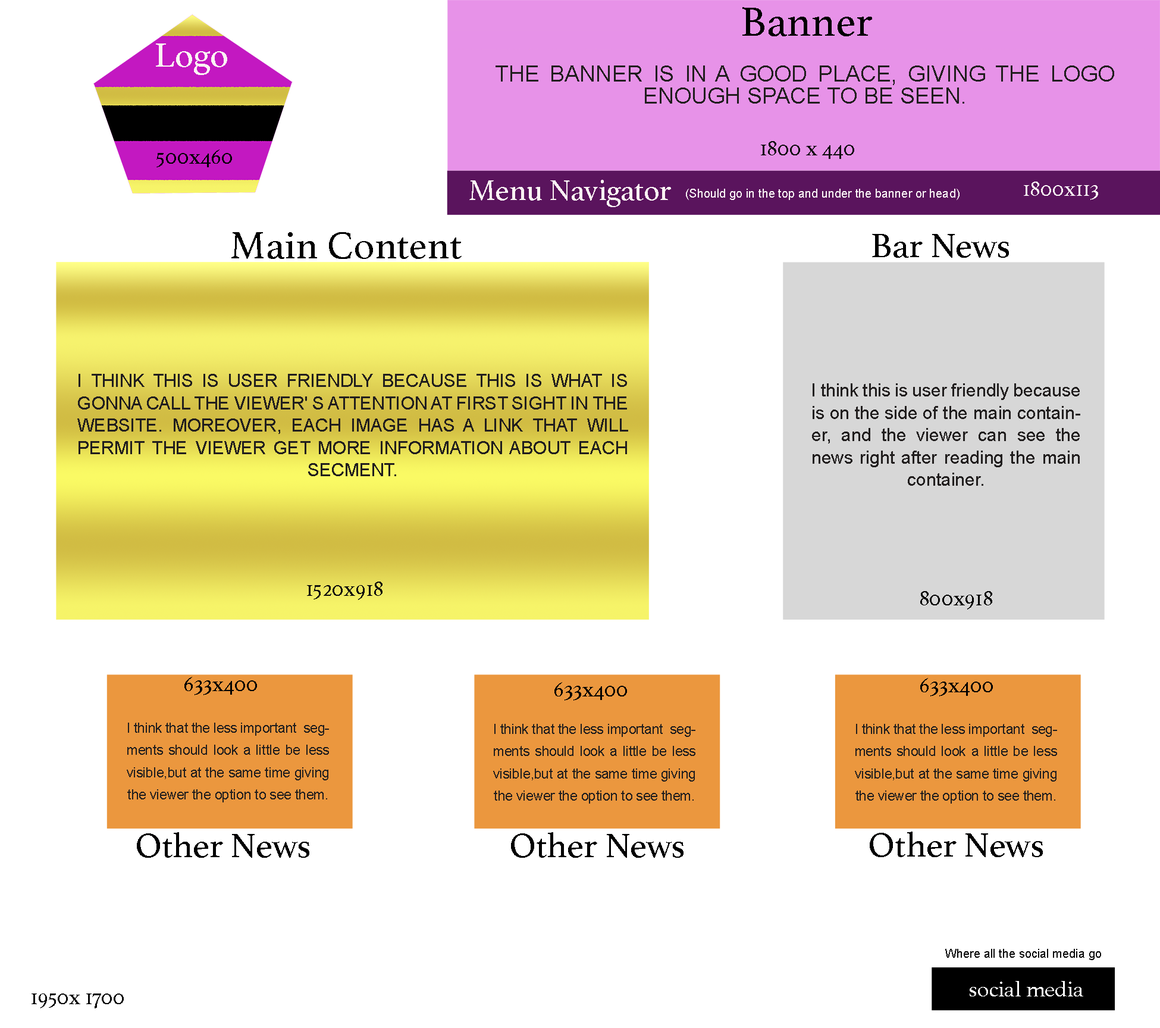
<style>
.page{position:relative;width:1160px;height:1028px;background:#ffffff}
.page>*{position:absolute;margin:0}
.t1{font:43.2px "Athelas-Regular";color:#000000}
.t2{font:35.7px "Athelas-Regular";color:#faf3f3}
.t3{font:22.3px/22.3px "ArialMT";color:#211e1e}
.t4{font:22.3px "Athelas-Regular";color:#000000}
.t5{font:22.3px "Athelas-Regular";color:#0e0e0e}
.t6{font:30.3px "Athelas-Regular";color:#faf3f3}
.t7{font:22.3px "Athelas-Regular";color:#f9f3f3}
.t8{font:11.9px "ArialMT";color:#fbf6f6}
.t9{font:40.1px "Athelas-Regular";color:#000000}
.t10{font:35.7px "Athelas-Regular";color:#000000}
.t11{font:17.9px/22.3px "ArialMT";color:#211e1e}
.t12{font:13.4px/22.3px "ArialMT";color:#211e1e}
.t13{font:11.9px "ArialMT";color:#080808}
.t14{font:22.3px "Athelas-Regular";color:#ffffff}
.t15{font:22.3px "Athelas-Regular";color:#080808}
</style>
<div class="page">
<p class="t1" style="left:743px;top:7px;width:129px;height:29px">Banner</p>
<p class="t2" style="left:156px;top:43px;width:71px;height:32px">Logo</p>
<p class="t3" style="left:496px;top:65px;width:619px;height:39px;text-align:justify">THE BANNER IS IN A GOOD PLACE, GIVING THE LOGO ENOUGH SPACE TO BE SEEN.</p>
<p class="t4" style="left:156px;top:149px;width:76px;height:18px">500x460</p>
<p class="t5" style="left:761px;top:141px;width:93px;height:18px">1800 x 440</p>
<p class="t6" style="left:469px;top:180px;width:202px;height:27px">Menu Navigator</p>
<p class="t7" style="left:1024px;top:181px;width:74px;height:19px">1800x113</p>
<p class="t8" style="left:686px;top:189px;width:274px;height:11px">(Should go in the top and under the banner or head)</p>
<p class="t9" style="left:231px;top:232px;width:231px;height:27px">Main Content</p>
<p class="t10" style="left:872px;top:234px;width:137px;height:24px">Bar News</p>
<p class="t11" style="left:77px;top:374px;width:551px;height:102px;text-align:justify">I THINK THIS IS USER FRIENDLY BECAUSE THIS IS WHAT IS GONNA CALL THE VIEWER' S ATTENTION AT FIRST SIGHT IN THE WEBSITE. MOREOVER, EACH IMAGE HAS A LINK THAT WILL PERMIT THE VIEWER GET MORE INFORMATION ABOUT EACH SECMENT.</p>
<p class="t11" style="left:812px;top:383px;width:269px;height:103px;text-align:justify">I think this is user friendly because is on the side of the main container, and the viewer can see the news right after reading the main container.</p>
<p class="t5" style="left:307px;top:581px;width:76px;height:19px">1520x918</p>
<p class="t4" style="left:921px;top:591px;width:72px;height:18px">800x918</p>
<p class="t4" style="left:184px;top:677px;width:73px;height:18px">633x400</p>
<p class="t4" style="left:921px;top:678px;width:72px;height:18px">633x400</p>
<p class="t4" style="left:555px;top:682px;width:72px;height:18px">633x400</p>
<p class="t12" style="left:127px;top:722px;width:202px;height:80px;text-align:justify">I think that the less important  segments should look a little be less visible,but at the same time giving the viewer the option to see them.</p>
<p class="t12" style="left:493px;top:724px;width:203px;height:79px;text-align:justify">I think that the less important  segments should look a little be less visible,but at the same time giving the viewer the option to see them.</p>
<p class="t12" style="left:855px;top:724px;width:202px;height:79px;text-align:justify">I think that the less important  segments should look a little be less visible,but at the same time giving the viewer the option to see them.</p>
<p class="t10" style="left:137px;top:832px;width:172px;height:25px">Other News</p>
<p class="t10" style="left:511px;top:832px;width:173px;height:25px">Other News</p>
<p class="t10" style="left:870px;top:831px;width:173px;height:26px">Other News</p>
<p class="t13" style="left:946px;top:949px;width:155px;height:11px">Where all the social media go</p>
<p class="t14" style="left:970px;top:981px;width:114px;height:15px">social media</p>
<p class="t15" style="left:32px;top:993px;width:92px;height:15px">1950x 1700</p>
</div>
